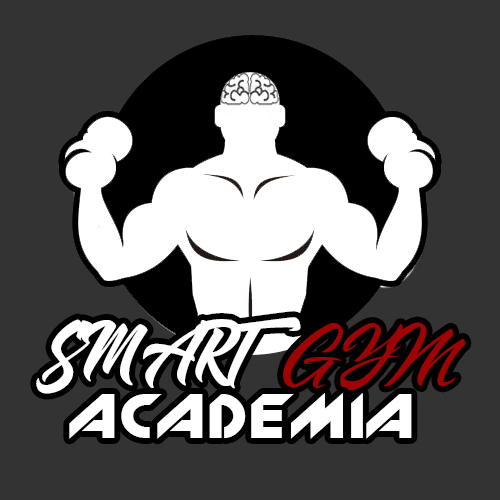
<style>
.page{position:relative;width:500px;height:500px;background:#333333}
.page>*{position:absolute;margin:0}
.t1{font:80px "ShandersFree";color:#ffffff}
.t2{font:80px "StripedKingClean";color:#9e0404}
.t3{font:60px "New_Zelek";color:#ffffff}
</style>
<div class="page">
<p class="t1" style="left:36px;top:317px;width:430px;height:77px">SMART  <span class="t2">GYM</span></p>
<p class="t3" style="left:69px;top:392px;width:343px;height:47px">ACADEMIA</p>
</div>
